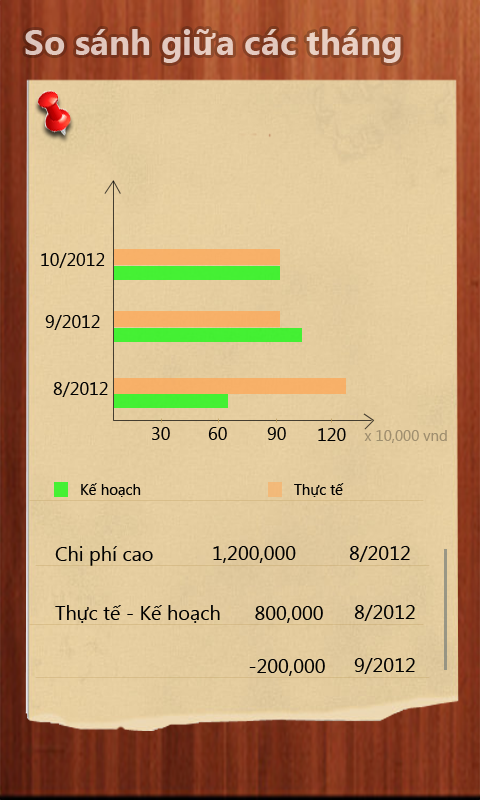
<style>
.page{position:relative;width:480px;height:800px}
.page>*{position:absolute;margin:0}
.t1{font:35px "SegoeUI-Bold";color:#e4cac0}
.t2{font:18px "SegoeUI";color:#000000}
.t3{font:15px "SegoeUI";color:#a08f6f}
.t4{font:15px "SegoeUI";color:#000000}
.t5{font:20px "SegoeUI";color:#000000}
</style>
<div class="page">
<p class="t1" style="left:25px;top:29px;width:376px;height:34px">So sánh giữa các tháng</p>
<p class="t2" style="left:41px;top:253px;width:64px;height:15px">10/2012</p>
<p class="t2" style="left:45px;top:315px;width:55px;height:15px">9/2012</p>
<p class="t2" style="left:53px;top:382px;width:55px;height:15px">8/2012</p>
<p class="t2" style="left:152px;top:427px;width:18px;height:13px">30</p>
<p class="t2" style="left:208px;top:427px;width:19px;height:13px">60</p>
<p class="t2" style="left:267px;top:427px;width:19px;height:13px">90</p>
<p class="t2" style="left:318px;top:428px;width:28px;height:13px">120</p>
<p class="t3" style="left:364px;top:430px;width:83px;height:13px">x 10,000 vnd</p>
<p class="t4" style="left:81px;top:483px;width:60px;height:14px">Kế hoạch</p>
<p class="t4" style="left:294px;top:483px;width:50px;height:14px">Thực tế</p>
<p class="t5" style="left:55px;top:546px;width:98px;height:20px">Chi phí cao nhất</p>
<p class="t5" style="left:213px;top:546px;width:83px;height:17px">1,200,000</p>
<p class="t5" style="left:349px;top:546px;width:61px;height:16px">8/2012</p>
<p class="t5" style="left:55px;top:605px;width:165px;height:18px">Thực tế - Kế hoạch</p>
<p class="t5" style="left:255px;top:606px;width:68px;height:17px">800,000</p>
<p class="t5" style="left:354px;top:605px;width:61px;height:16px">8/2012</p>
<p class="t5" style="left:249px;top:659px;width:76px;height:17px">-200,000</p>
<p class="t5" style="left:354px;top:658px;width:61px;height:16px">9/2012</p>
</div>
